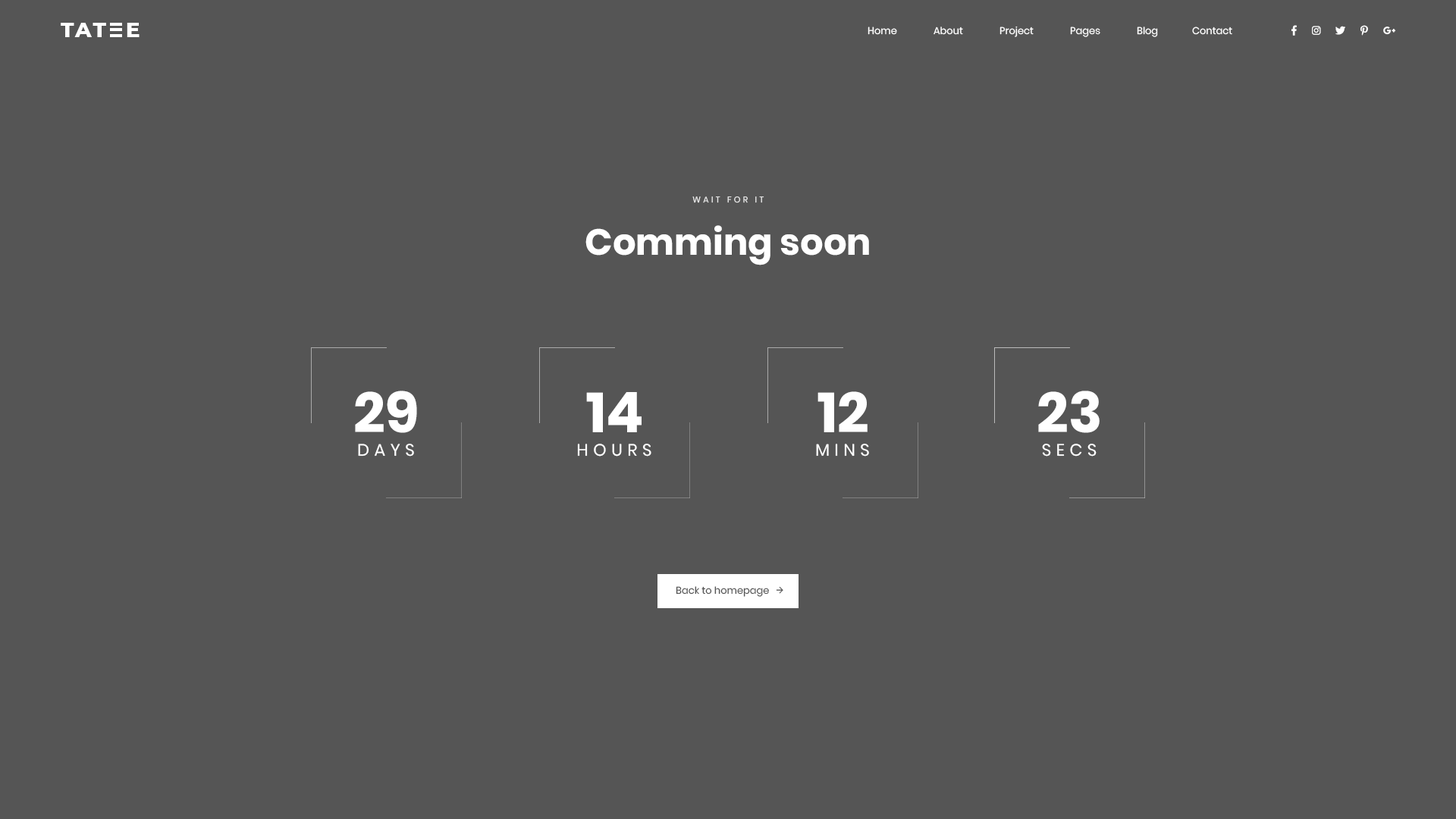
<style>
.page{position:relative;width:1456px;height:819px;background:#555555}
.page>*{position:absolute;margin:0}
.t1{font:20.9px "Montserrat-ExtraBold";letter-spacing:0.1em;color:#ffffff;text-transform:uppercase}
.t2{font:9.9px "Poppins-Regular";color:#ffffff}
.t3{font:8.3px "Poppins-Regular";letter-spacing:0.3em;color:#ebebeb;text-transform:uppercase}
.t4{font:36.4px "Poppins-Bold";color:#ffffff}
.t5{font:56.1px "Poppins-Bold";color:#ffffff}
.t6{font:16.7px "Poppins-Regular";letter-spacing:0.3em;color:#ffffff;text-transform:uppercase}
.t7{font:9.9px "Poppins-Regular";color:#555555}
</style>
<div class="page">
<p class="t1" style="left:61px;top:23px;width:45px;height:14px">tat</p>
<p class="t1" style="left:127px;top:23px;width:13px;height:14px">e</p>
<p class="t2" style="left:868px;top:26px;width:364px;height:11px">Home               About               Project               Pages               Blog              Contact</p>
<p class="t3" style="left:692px;top:196px;width:72px;height:7px">wait for it</p>
<p class="t4" style="left:585px;top:225px;width:284px;height:40px">Comming soon</p>
<p class="t5" style="left:355px;top:391px;width:62px;height:42px">29</p>
<p class="t5" style="left:586px;top:392px;width:56px;height:40px">14</p>
<p class="t5" style="left:817px;top:391px;width:51px;height:41px">12</p>
<p class="t5" style="left:1038px;top:391px;width:62px;height:42px">23</p>
<p class="t6" style="left:358px;top:444px;width:56px;height:13px">Days</p>
<p class="t6" style="left:577px;top:444px;width:74px;height:13px">Hours</p>
<p class="t6" style="left:816px;top:444px;width:53px;height:13px">Mins</p>
<p class="t6" style="left:1042px;top:444px;width:55px;height:13px">secs</p>
<p class="t7" style="left:676px;top:586px;width:93px;height:11px">Back to homepage</p>
</div>
